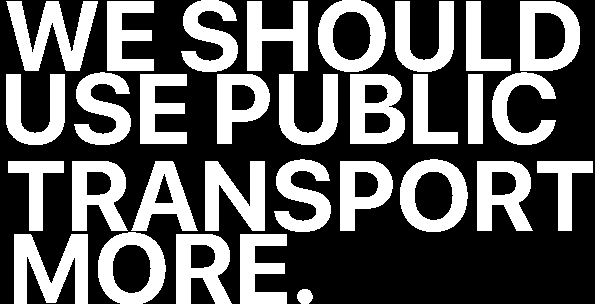
<style>
.page{position:relative;width:595px;height:304px;background:#000000}
.page>*{position:absolute;margin:0}
.t1{font:100px "SFProDisplay-Bold";color:#ffffff;text-transform:uppercase}
</style>
<div class="page">
<p class="t1" style="left:6px;top:0px;width:574px;height:72px">We Should</p>
<p class="t1" style="left:6px;top:72px;width:550px;height:73px">Use public</p>
<p class="t1" style="left:8px;top:159px;width:585px;height:73px">Transport</p>
<p class="t1" style="left:14px;top:232px;width:299px;height:73px">More.</p>
</div>
